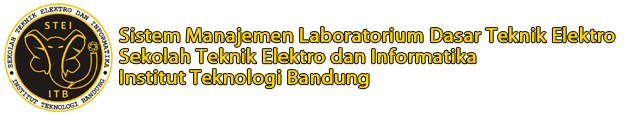
<style>
.page{position:relative;width:625px;height:114px;background:#ffffff}
.page>*{position:absolute;margin:0}
.t1{font:20.8px/20.8px "MyriadPro-Regular";color:#ffd405;font-weight:bold}
</style>
<div class="page">
<p class="t1" style="left:119px;top:27px;width:496px;height:62px">Sistem Manajemen Laboratorium Dasar Teknik Elektro<br>Sekolah Teknik Elektro dan Informatika<br>Institut Teknologi Bandung</p>
</div>
